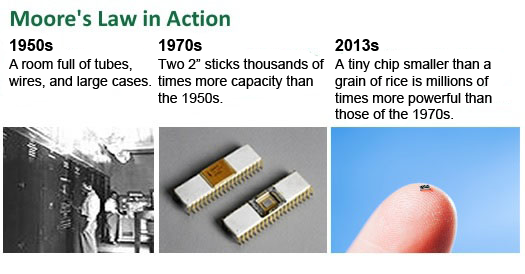
<style>
.page{position:relative;width:525px;height:274px;background:#ffffff}
.page>*{position:absolute;margin:0}
.t1{font:16px "Arial-BoldMT";color:#000000}
.t2{font:14px "ArialMT";color:#000000}
</style>
<div class="page">
<p class="t1" style="left:10px;top:39px;width:43px;height:12px">1950s</p>
<p class="t1" style="left:159px;top:39px;width:43px;height:12px">1970s</p>
<p class="t1" style="left:335px;top:39px;width:44px;height:12px">2013s</p>
<p class="t2" style="left:9px;top:58px;width:142px;height:31px">A room full of tubes, wires, and large cases.</p>
<p class="t2" style="left:158px;top:58px;width:167px;height:45px">Two 2” sticks thousands of times more capacity than the 1950s.</p>
<p class="t2" style="left:335px;top:58px;width:157px;height:61px">A tiny chip smaller than a grain of rice is millions of times more powerful than those of the 1970s.</p>
</div>
